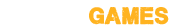
<style>
.page{position:relative;width:175px;height:25px;background:#ffffff}
.page>*{position:absolute;margin:0}
.t1{font:19px "PlaneCrash";color:#ffb320}
.t2{font:19px "PlaneCrash";color:#ffffff}
</style>
<div class="page">
<p class="t1" style="left:32px;top:7px;width:137px;height:18px"><span class="t2">wiki </span>games</p>
</div>
